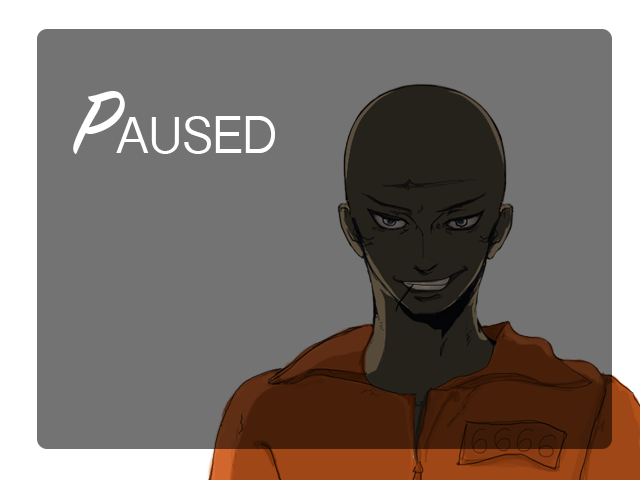
<style>
.page{position:relative;width:640px;height:480px;background:#737373}
.page>*{position:absolute;margin:0}
.t1{font:48px "SinhalaSangamMN-Bold";color:#ffffff}
.t2{font:100px "SignPainter-HouseScript";color:#ffffff}
</style>
<div class="page">
<p class="t1" style="left:73px;top:91px;width:202px;height:63px"><span class="t2">P</span>AUSED</p>
</div>
